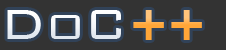
<style>
.page{position:relative;width:226px;height:50px;background:#333333}
.page>*{position:absolute;margin:0}
.t1{font:56.3px "BankGothic-Light";color:#ffffff}
.t2{font:56.3px "BernardMT-Condensed"}
</style>
<div class="page">
<p class="t1" style="left:7px;top:10px;width:114px;height:29px">DoC</p>
<p class="t2" style="left:133px;top:10px;width:69px;height:30px">++</p>
</div>
